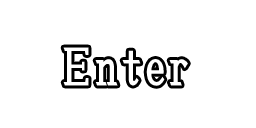
<style>
.page{position:relative;width:256px;height:128px;background:#ffffff}
.page>*{position:absolute;margin:0}
.t1{font:48px "HGSSoeiPresenceEB";letter-spacing:0.08em;color:#ffffff}
</style>
<div class="page">
<p class="t1" style="left:63px;top:47px;width:125px;height:39px">Enter</p>
</div>
